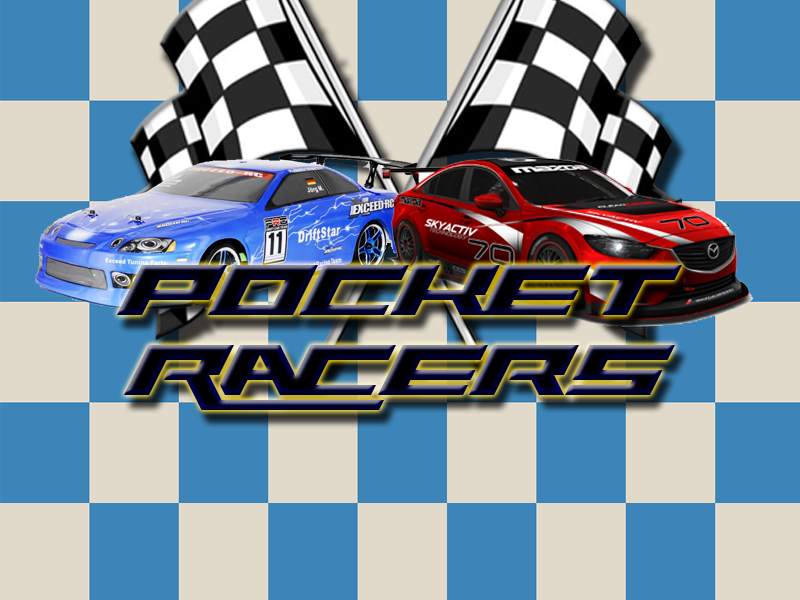
<style>
.page{position:relative;width:800px;height:600px;background:#e1dacb}
.page>*{position:absolute;margin:0}
.t1{font:80px/80px "Rawhide-Raw-2012"}
</style>
<div class="page">
<p class="t1" style="left:117px;top:265px;width:565px;height:145px;text-align:center">Pocket<br>Racers</p>
</div>
